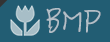
<style>
.page{position:relative;width:110px;height:42px;background:#225d73}
.page>*{position:absolute;margin:0}
.t1{font:48px "FZJLJW--GB1-0";color:#b3bfc7}
</style>
<div class="page">
<p class="t1" style="left:46px;top:8px;width:55px;height:25px">BMP</p>
</div>
